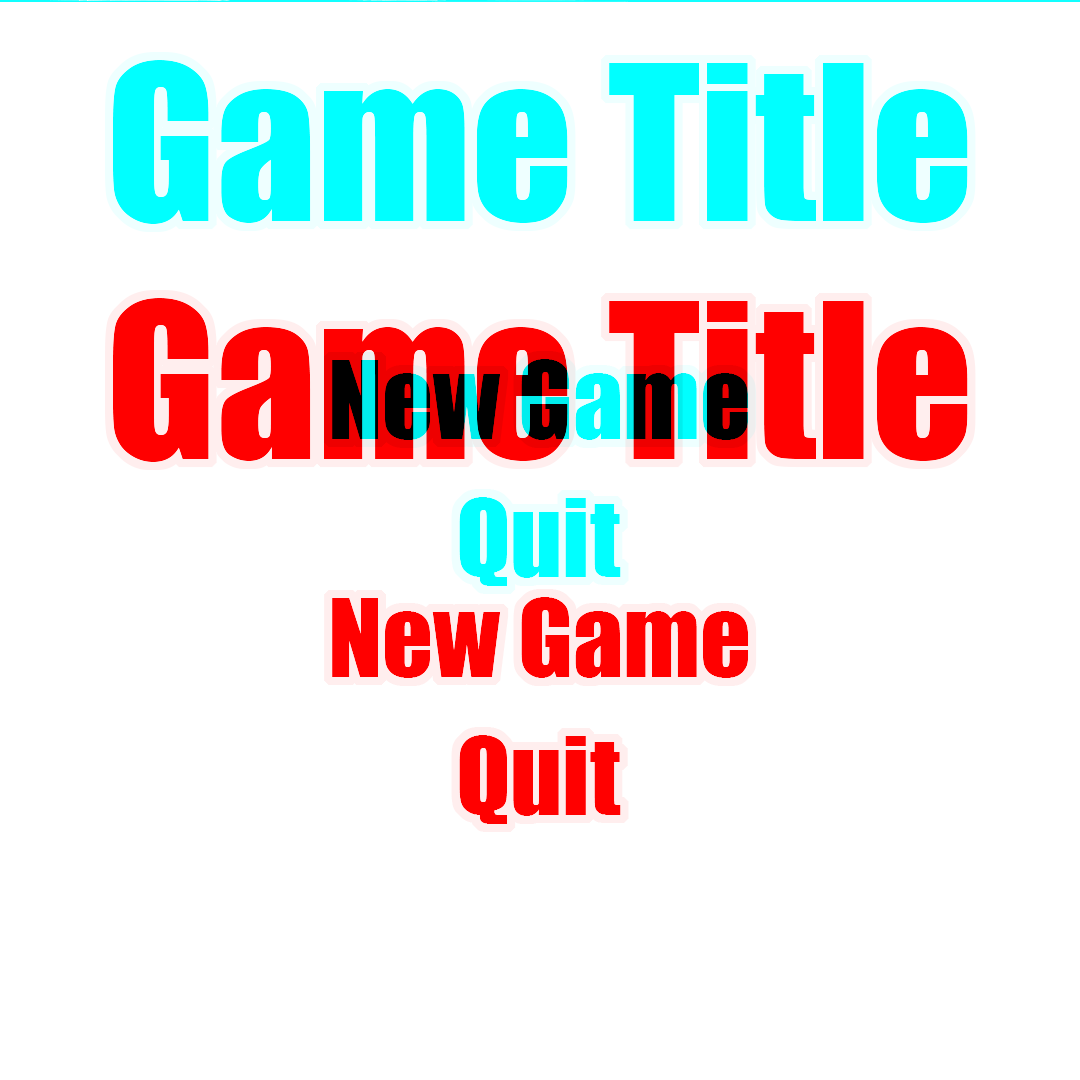
<style>
.page{position:relative;width:1080px;height:1080px;background:#ffffff}
.page>*{position:absolute;margin:0}
.t1{font:200px "Impact";color:#00ffff}
.t2{font:100px "Impact"}
.t3{font:100px "Impact";color:#00ffff}
</style>
<div class="page">
<p class="t1" style="left:113px;top:58px;width:855px;height:164px">Game Title</p>
<p class="t2" style="left:332px;top:357px;width:417px;height:81px">New Game</p>
<p class="t3" style="left:459px;top:495px;width:162px;height:89px">Quit</p>
</div>
